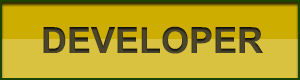
<style>
.page{position:relative;width:300px;height:80px;background:#d9c240}
.page>*{position:absolute;margin:0}
.t1{font:36px "Arial-BoldMT";color:#4a452b}
</style>
<div class="page">
<p class="t1" style="left:43px;top:26px;width:220px;height:28px">DEVELOPER</p>
</div>
